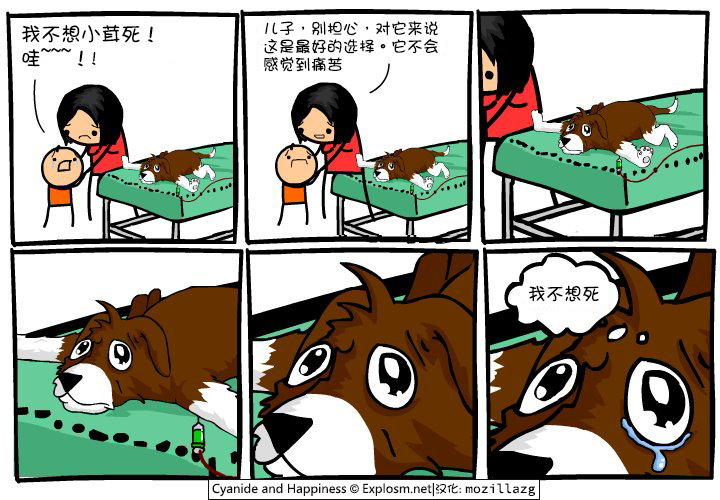
<style>
.page{position:relative;width:720px;height:500px;background:#ffffff}
.page>*{position:absolute;margin:0}
.t1{font:20px/24px "DFGirl";color:#000000}
.t2{font:16px/18px "DFGirl";color:#000000}
.t3{font:18px "DFGirl";color:#000000}
</style>
<div class="page">
<p class="t1" style="left:21px;top:24px;width:132px;height:43px">我不想小茸死！<br>哇~~~！!</p>
<p class="t2" style="left:264px;top:21px;width:174px;height:51px">儿子，别担心，对它来说<br>这是最好的选择。它不会<br>感觉到痛苦</p>
<p class="t3" style="left:528px;top:285px;width:71px;height:17px">我不想死</p>
</div>
